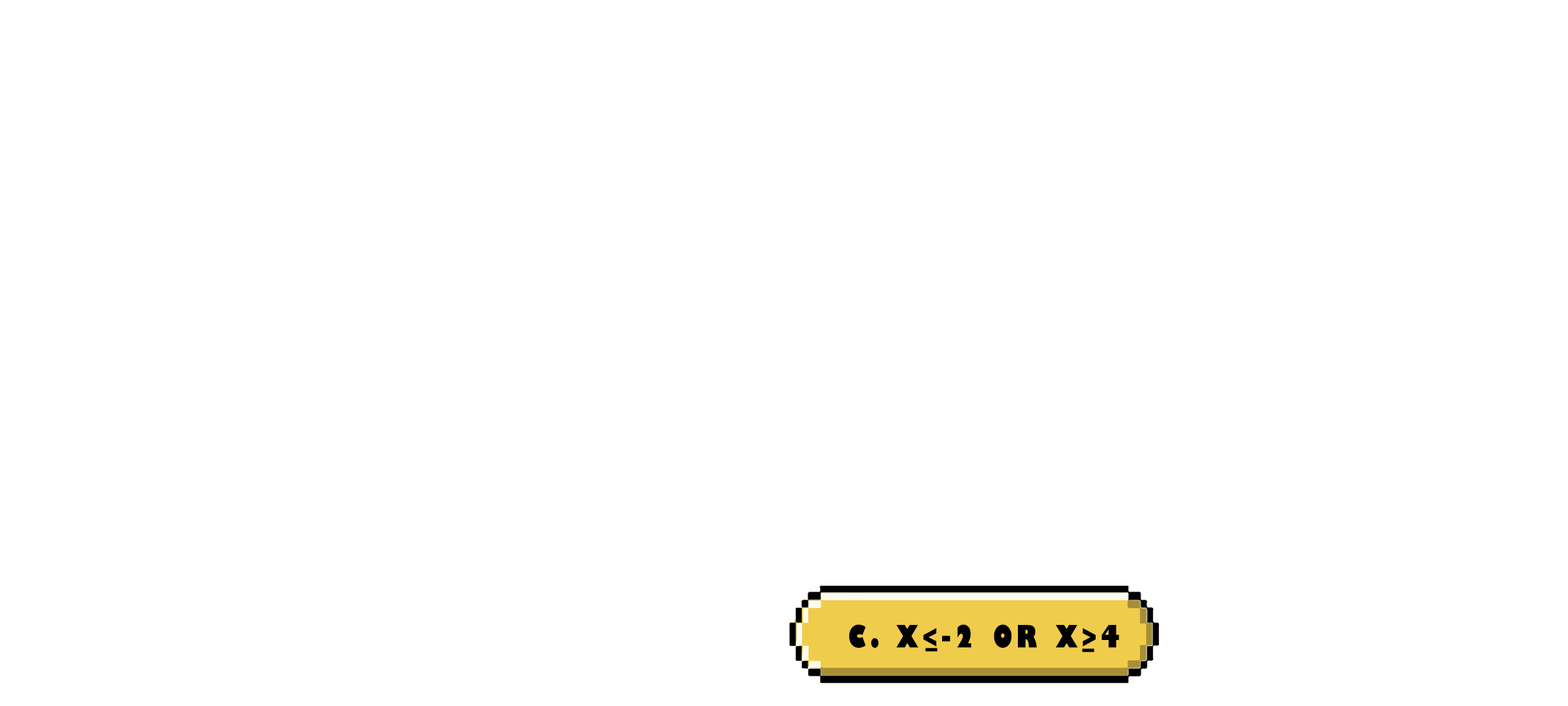
<style>
.page{position:relative;width:1568px;height:706px;background:#ffffff}
.page>*{position:absolute;margin:0}
.t1{font:29.9px "GillSans-UltraBoldCondensed";letter-spacing:0.115em;color:#000000;text-transform:uppercase;scale:1.12 1}
</style>
<div class="page">
<p class="t1" style="left:849px;top:624px;width:270px;height:23px">c. x&lt;-2 or x&gt;4</p>
<p class="t1" style="left:925px;top:647px;width:13px;height:4px">_</p>
<p class="t1" style="left:1082px;top:648px;width:12px;height:4px">_</p>
</div>
